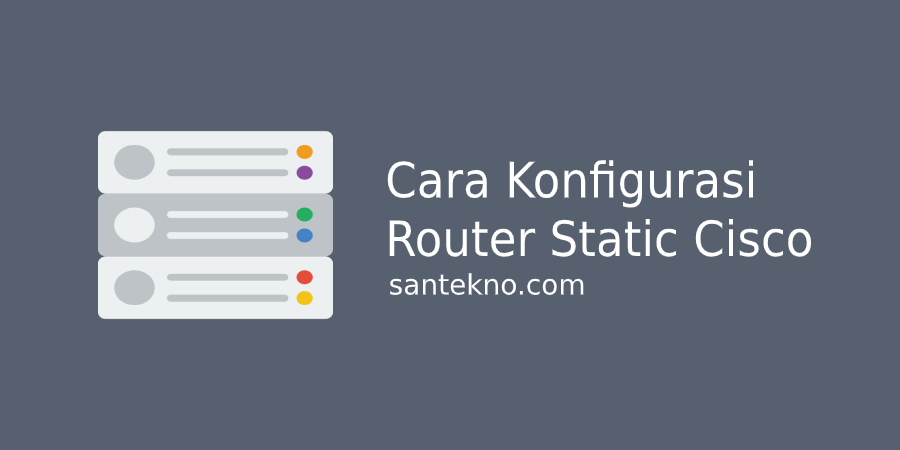
<style>
.page{position:relative;width:900px;height:450px;background:#57606f}
.page>*{position:absolute;margin:0}
.t1{font:48.8px "Impact";color:#ffffff;scale:0.93 1}
.t2{font:28px "Impact";color:#ffffff}
</style>
<div class="page">
<p class="t1" style="left:387px;top:160px;width:424px;height:97px">Cara Konfigurasi<br>Router Static Cisco</p>
<p class="t2" style="left:390px;top:273px;width:194px;height:22px">santekno.com</p>
</div>
